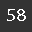
<style>
.page{position:relative;width:32px;height:32px;background:#333333}
.page>*{position:absolute;margin:0}
.t1{font:17.8px "MyriadPro-Regular";color:#ffffff;scale:1.12 1}
</style>
<div class="page">
<p class="t1" style="left:7px;top:9px;width:19px;height:12px">58</p>
</div>
